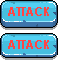
<style>
.page{position:relative;width:58px;height:60px;background:#46bedf}
.page>*{position:absolute;margin:0}
.t1{font:12px "CenturyGothic-Bold";color:#ff4545}
</style>
<div class="page">
<p class="t1" style="left:8px;top:7px;width:41px;height:9px">ATTACK</p>
<p class="t1" style="left:8px;top:40px;width:41px;height:9px">ATTACK</p>
</div>
